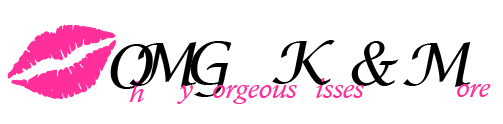
<style>
.page{position:relative;width:503px;height:124px;background:#ffffff}
.page>*{position:absolute;margin:0}
.t1{font:60px "LucidaCalligraphy-Italic";color:#000000}
.t2{font:60px "LucidaCalligraphy-Italic";color:#010001}
.t3{font:30px "CalistoMT-Italic";color:#fe2e9a}
</style>
<div class="page">
<p class="t1" style="left:190px;top:41px;width:42px;height:56px">G</p>
<p class="t1" style="left:272px;top:40px;width:63px;height:45px">K</p>
<p class="t1" style="left:351px;top:41px;width:48px;height:45px">&amp;</p>
<p class="t2" style="left:110px;top:44px;width:43px;height:45px">O</p>
<p class="t1" style="left:129px;top:42px;width:68px;height:45px">M</p>
<p class="t1" style="left:403px;top:42px;width:68px;height:45px">M</p>
<p class="t3" style="left:316px;top:78px;width:48px;height:20px">isses</p>
<p class="t3" style="left:129px;top:81px;width:15px;height:21px">h</p>
<p class="t3" style="left:177px;top:85px;width:16px;height:19px">y</p>
<p class="t3" style="left:213px;top:85px;width:84px;height:19px">orgeous</p>
<p class="t3" style="left:457px;top:84px;width:34px;height:13px">ore</p>
</div>
